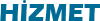
<style>
.page{position:relative;width:100px;height:21px;background:#006c95}
.page>*{position:absolute;margin:0}
.t1{font:25px "ErasITC-Bold";color:#006c95}
</style>
<div class="page">
<p class="t1" style="left:0px;top:4px;width:101px;height:17px">HIZMET</p>
</div>
